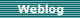
<style>
.page{position:relative;width:80px;height:18px;background:#7fb2b2}
.page>*{position:absolute;margin:0}
.t1{font:11px "Verdana-Bold";color:#ffffff}
</style>
<div class="page">
<p class="t1" style="left:17px;top:4px;width:47px;height:12px">Weblog</p>
</div>
